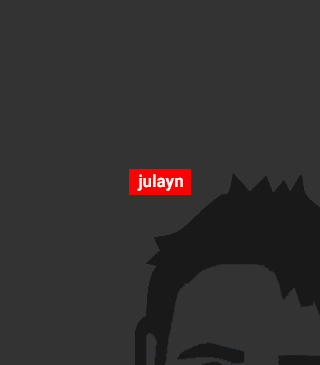
<style>
.page{position:relative;width:320px;height:365px;background:#333333}
.page>*{position:absolute;margin:0}
.t1{font:17px "Roboto-Bold";color:#ffffff}
</style>
<div class="page">
<p class="t1" style="left:137px;top:174px;width:46px;height:17px">julayn</p>
</div>
